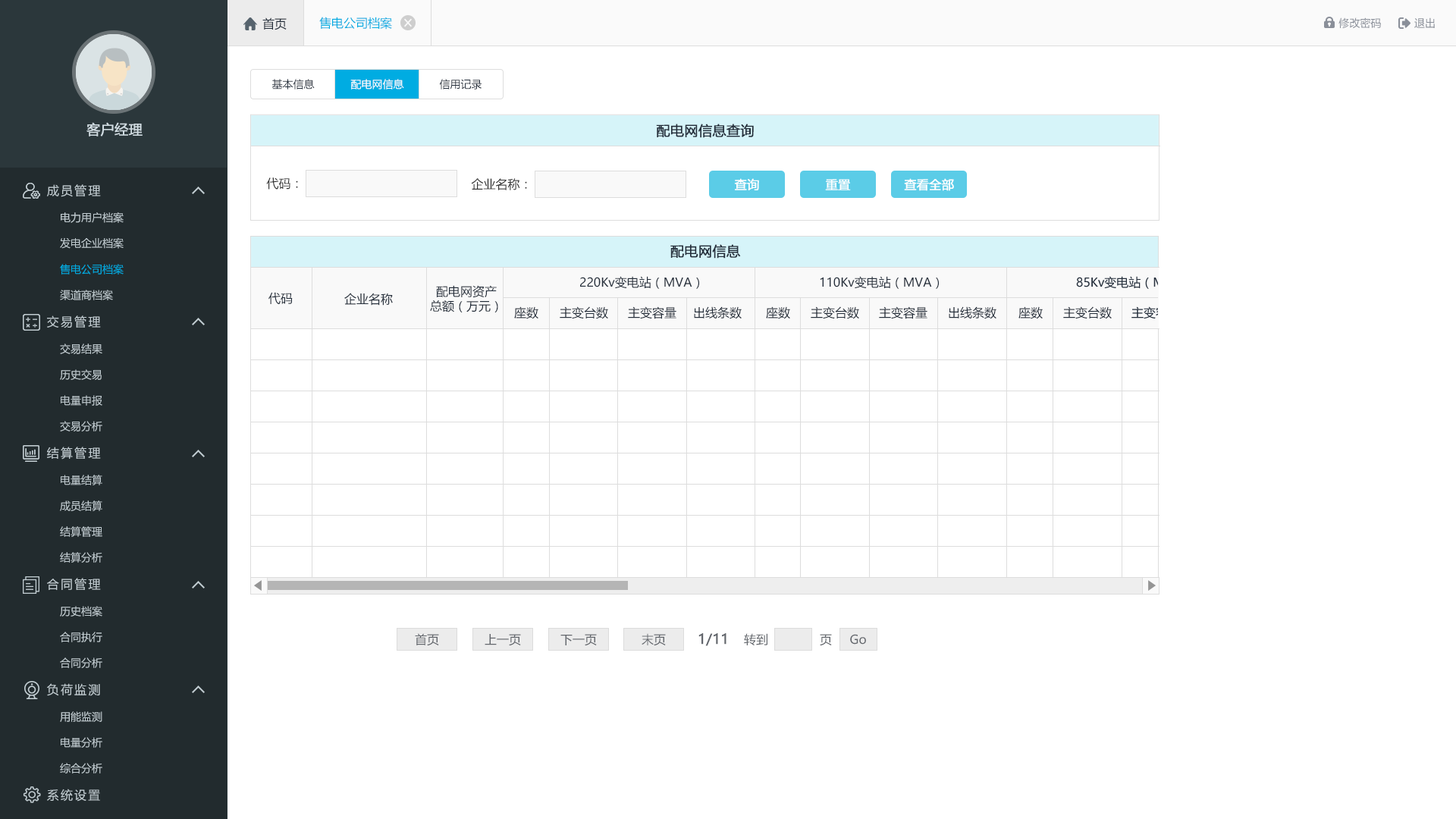
<style>
.page{position:relative;width:1456px;height:819px;background:#ffffff}
.page>*{position:absolute;margin:0}
.t1{font:12.1px "MicrosoftYaHei";color:#242e3b}
.t2{font:12.1px "MicrosoftYaHei";color:#00ace2}
.t3{font:10.6px "MicrosoftYaHei";color:#8a8f99}
.t4{font:10.6px "MicrosoftYaHei";color:#242e3b}
.t5{font:10.6px "MicrosoftYaHei";color:#ffffff}
.t6{font:13.6px "MicrosoftYaHei";color:#d1dce2;font-weight:bold}
.t7{font:13.6px "MicrosoftYaHei";color:#242e3b;font-weight:bold}
.t8{font:12.1px "MicrosoftYaHei";letter-spacing:0.14em;color:#c2cdd2}
.t9{font:12.1px "MicrosoftYaHei";color:#333333}
.t10{font:12.1px "MicrosoftYaHei";color:#ffffff;font-weight:bold}
.t11{font:10.6px "MicrosoftYaHei";color:#c2cdd2}
.t12{font:10.6px "MicrosoftYaHei";color:#00ace2}
.t13{font:12.1px "MicrosoftYaHei";color:#61656b}
.t14{font:13.6px "MicrosoftYaHei";color:#61656b;font-weight:bold}
</style>
<div class="page">
<p class="t1" style="left:262px;top:17px;width:25px;height:13px">首页</p>
<p class="t2" style="left:319px;top:17px;width:73px;height:13px">售电公司档案</p>
<p class="t3" style="left:1338px;top:17px;width:43px;height:12px">修改密码</p>
<p class="t3" style="left:1414px;top:17px;width:21px;height:11px">退出</p>
<p class="t4" style="left:271px;top:79px;width:44px;height:10px">基本信息</p>
<p class="t5" style="left:350px;top:79px;width:54px;height:10px">配电网信息</p>
<p class="t4" style="left:439px;top:79px;width:43px;height:10px">信用记录</p>
<p class="t6" style="left:86px;top:122px;width:57px;height:14px">客户经理</p>
<p class="t7" style="left:656px;top:124px;width:98px;height:14px">配电网信息查询</p>
<p class="t8" style="left:47px;top:184px;width:54px;height:13px">成员管理</p>
<p class="t9" style="left:266px;top:177px;width:32px;height:13px">代码：</p>
<p class="t9" style="left:471px;top:178px;width:56px;height:12px">企业名称：</p>
<p class="t10" style="left:734px;top:178px;width:25px;height:12px">查询</p>
<p class="t10" style="left:825px;top:180px;width:26px;height:12px">重置</p>
<p class="t10" style="left:825px;top:179px;width:26px;height:11px">重置</p>
<p class="t10" style="left:904px;top:178px;width:50px;height:13px">查看全部</p>
<p class="t11" style="left:61px;top:212px;width:63px;height:11px">电力用户档案</p>
<p class="t11" style="left:60px;top:237px;width:64px;height:12px">发电企业档案</p>
<p class="t7" style="left:670px;top:244px;width:71px;height:15px">配电网信息</p>
<p class="t12" style="left:60px;top:264px;width:64px;height:11px">售电公司档案</p>
<p class="t1" style="left:580px;top:276px;width:119px;height:13px">220Kv变电站（MVA）</p>
<p class="t1" style="left:820px;top:276px;width:119px;height:13px">110Kv变电站（MVA）</p>
<p class="t11" style="left:60px;top:290px;width:53px;height:10px">渠道商档案</p>
<p class="t1" style="left:268px;top:292px;width:25px;height:12px">代码</p>
<p class="t1" style="left:344px;top:293px;width:49px;height:13px">企业名称</p>
<p class="t1" style="left:430px;top:285px;width:68px;height:27px;text-align:center">配电网资产<br>总额（万元）</p>
<p class="t8" style="left:47px;top:315px;width:54px;height:13px">交易管理</p>
<p class="t1" style="left:514px;top:306px;width:24px;height:13px">座数</p>
<p class="t1" style="left:560px;top:306px;width:48px;height:13px">主变台数</p>
<p class="t1" style="left:628px;top:306px;width:48px;height:13px">主变容量</p>
<p class="t1" style="left:694px;top:306px;width:48px;height:13px">出线条数</p>
<p class="t1" style="left:766px;top:306px;width:24px;height:13px">座数</p>
<p class="t1" style="left:811px;top:306px;width:48px;height:13px">主变台数</p>
<p class="t1" style="left:879px;top:306px;width:48px;height:13px">主变容量</p>
<p class="t1" style="left:949px;top:306px;width:47px;height:13px">出线条数</p>
<p class="t1" style="left:1018px;top:306px;width:25px;height:13px">座数</p>
<p class="t1" style="left:1063px;top:306px;width:49px;height:13px">主变台数</p>
<p class="t11" style="left:60px;top:344px;width:42px;height:10px">交易结果</p>
<p class="t11" style="left:60px;top:369px;width:42px;height:11px">历史交易</p>
<p class="t11" style="left:61px;top:395px;width:41px;height:11px">电量申报</p>
<p class="t11" style="left:60px;top:421px;width:42px;height:10px">交易分析</p>
<p class="t8" style="left:47px;top:447px;width:54px;height:13px">结算管理</p>
<p class="t11" style="left:61px;top:475px;width:41px;height:10px">电量结算</p>
<p class="t11" style="left:60px;top:500px;width:42px;height:11px">成员结算</p>
<p class="t11" style="left:60px;top:526px;width:42px;height:11px">结算管理</p>
<p class="t11" style="left:60px;top:552px;width:42px;height:11px">结算分析</p>
<p class="t8" style="left:47px;top:578px;width:54px;height:12px">合同管理</p>
<p class="t11" style="left:60px;top:606px;width:42px;height:11px">历史档案</p>
<p class="t11" style="left:60px;top:632px;width:42px;height:10px">合同执行</p>
<p class="t13" style="left:415px;top:633px;width:24px;height:13px">首页</p>
<p class="t13" style="left:485px;top:634px;width:36px;height:12px">上一页</p>
<p class="t13" style="left:560px;top:634px;width:37px;height:12px">下一页</p>
<p class="t13" style="left:642px;top:633px;width:24px;height:13px">末页</p>
<p class="t14" style="left:698px;top:633px;width:28px;height:13px">1/11</p>
<p class="t13" style="left:744px;top:633px;width:23px;height:12px">转到</p>
<p class="t13" style="left:820px;top:634px;width:12px;height:12px">页</p>
<p class="t13" style="left:850px;top:634px;width:16px;height:11px">Go</p>
<p class="t11" style="left:60px;top:657px;width:42px;height:11px">合同分析</p>
<p class="t8" style="left:47px;top:683px;width:53px;height:13px">负荷监测</p>
<p class="t11" style="left:60px;top:711px;width:42px;height:11px">用能监测</p>
<p class="t11" style="left:61px;top:737px;width:41px;height:11px">电量分析</p>
<p class="t11" style="left:60px;top:763px;width:42px;height:10px">综合分析</p>
<p class="t8" style="left:47px;top:789px;width:53px;height:13px">系统设置</p>
</div>
